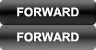
<style>
.page{position:relative;width:96px;height:50px}
.page>*{position:absolute;margin:0}
.t1{font:12px "Arial-BoldMT";color:#ffffff}
</style>
<div class="page">
<p class="t1" style="left:17px;top:7px;width:62px;height:10px">FORWARD</p>
<p class="t1" style="left:17px;top:32px;width:62px;height:10px">FORWARD</p>
</div>
